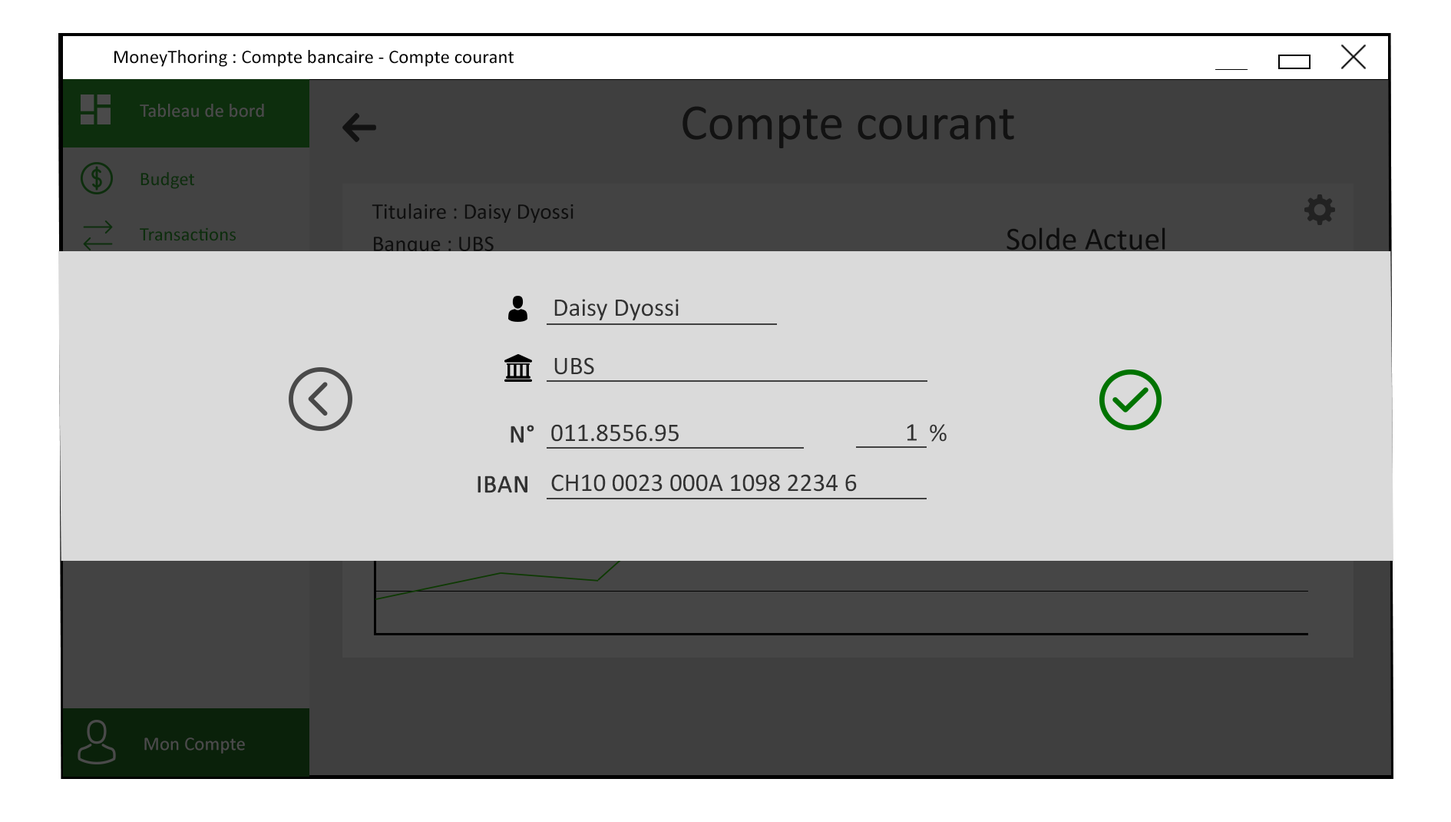
<style>
.page{position:relative;width:1451px;height:822px;background:#dadada}
.page>*{position:absolute;margin:0}
.t1{font:19.2px "Calibri";color:#010101}
.t2{font:19.2px "Calibri";color:#4a4a4a}
.t3{font:51.2px "Calibri";color:#121212}
.t4{font:19.2px "Calibri";color:#0d2e0d}
.t5{font:32px "Calibri";color:#0d0d0d}
.t6{font:25.6px "Calibri";color:#323232}
.t7{font:25.6px "Calibri";color:#323232;font-weight:bold}
</style>
<div class="page">
<p class="t1" style="left:114px;top:50px;width:400px;height:17px">MoneyThoring : Compte bancaire - Compte courant</p>
<p class="t2" style="left:140px;top:104px;width:124px;height:13px">Tableau de bord</p>
<p class="t3" style="left:683px;top:106px;width:331px;height:42px">Compte courant</p>
<p class="t4" style="left:141px;top:172px;width:53px;height:17px">Budget</p>
<p class="t4" style="left:140px;top:227px;width:96px;height:14px">Transactions</p>
<p class="t5" style="left:1007px;top:227px;width:159px;height:23px">Solde Actuel</p>
<p class="t6" style="left:554px;top:299px;width:125px;height:21px">Daisy Dyossi</p>
<p class="t6" style="left:554px;top:357px;width:40px;height:18px">UBS</p>
<p class="t7" style="left:511px;top:425px;width:23px;height:18px">N°</p>
<p class="t6" style="left:551px;top:424px;width:128px;height:18px">011.8556.95</p>
<p class="t6" style="left:907px;top:424px;width:10px;height:17px">1</p>
<p class="t6" style="left:930px;top:424px;width:17px;height:18px">%</p>
<p class="t6" style="left:551px;top:474px;width:306px;height:17px">CH10 0023 000A 1098 2234 6</p>
<p class="t7" style="left:478px;top:475px;width:50px;height:18px">IBAN</p>
<p class="t2" style="left:144px;top:737px;width:101px;height:16px">Mon Compte</p>
</div>
